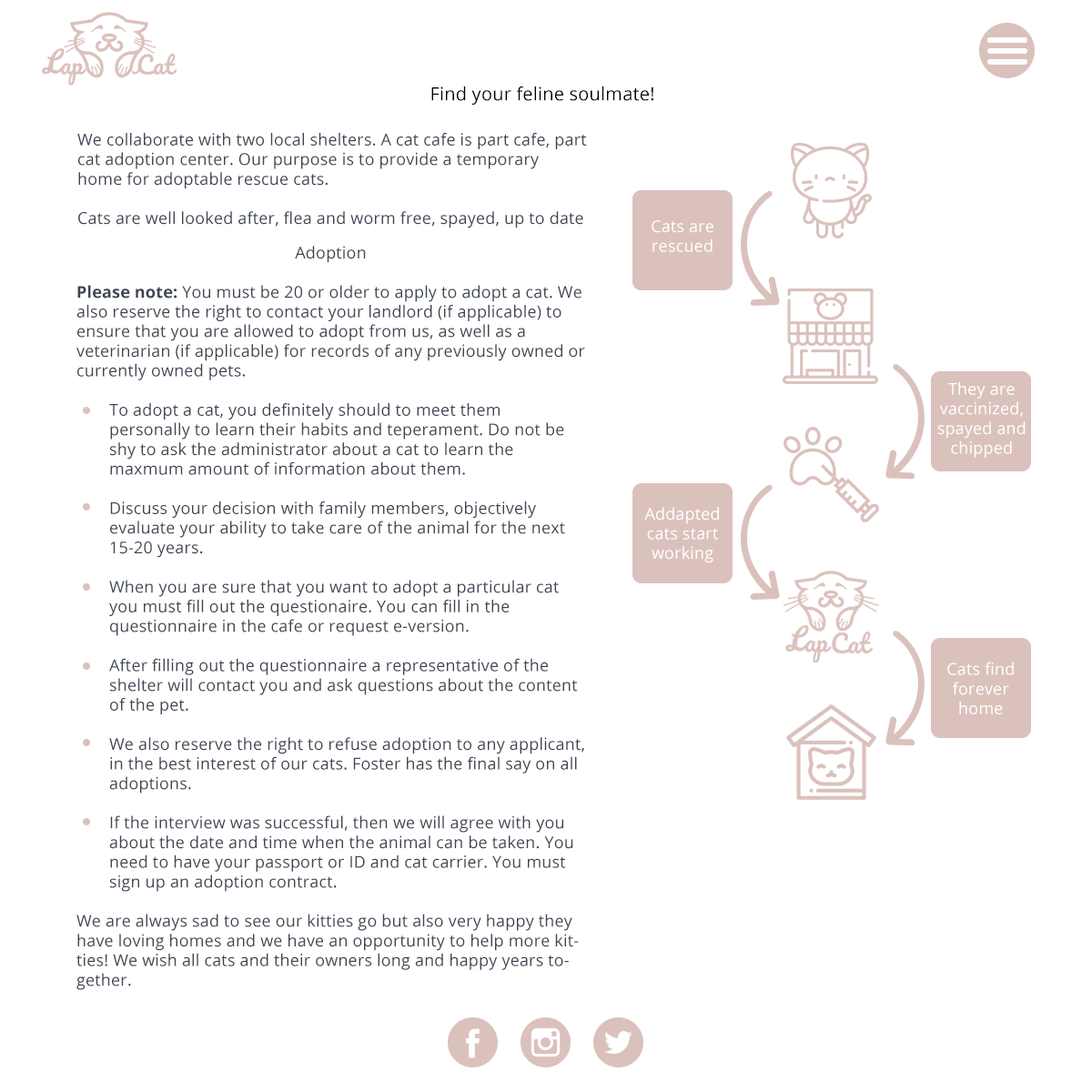
<style>
.page{position:relative;width:1092px;height:1092px;background:#ffffff}
.page>*{position:absolute;margin:0}
.t1{font:18.2px "OpenSans";letter-spacing:0.01em;color:#000000}
.t2{font:16.4px "OpenSans";letter-spacing:0.01em;color:#3c4552}
.t3{font:16.4px "OpenSans";letter-spacing:0.01em;color:#ffffff}
.t4{font:16.4px "OpenSans-Bold";letter-spacing:0.01em;color:#3c4552}
</style>
<div class="page">
<p class="t1" style="left:431px;top:86px;width:222px;height:19px">Find your feline soulmate!</p>
<p class="t2" style="left:77px;top:133px;width:510px;height:95px">We collaborate with two local shelters. A cat cafe is part cafe, part cat adoption center. Our purpose is to provide a temporary home for adoptable rescue cats.<br><br>Cats are well looked after, flea and worm free, spayed, up to date with injections and microchipped for safety. They are socialized by our cat staff from a feral kitten to a friendly cat.</p>
<p class="t3" style="left:652px;top:220px;width:61px;height:32px;text-align:center">Cats are <br>rescued</p>
<p class="t2" style="left:76px;top:246px;width:509px;height:744px;text-align:center">Adoption<br><br><span class="t4">Please note:</span> You must be 20 or older to apply to adopt a cat. We also reserve the right to contact your landlord (if applicable) to ensure that you are allowed to adopt from us, as well as a <br>veterinarian (if applicable) for records of any previously owned or currently owned pets.<br><br> To adopt a cat, you definitely should to meet them<br> personally to learn their habits and teperament. Do not be   shy to ask the administrator about a cat to learn the     maxmum amount of information about them. <br><br> Discuss your decision with family members, objectively <br> evaluate your ability to take care of the animal for the next   15-20 years.<br><br> When you are sure that you want to adopt a particular cat    you must fill out the questionaire. You can fill in the <br> questionnaire in the cafe or request e-version.<br><br> After filling out the questionnaire a representative of the    shelter will contact you and ask questions about the content   of the pet.<br><br> We also reserve the right to refuse adoption to any applicant,   in the best interest of our cats. Foster has the final say on all   adoptions.<br><br> If the interview was successful, then we will agree with you   about the date and time when the animal can be taken. You   need to have your passport or ID and cat carrier. You must   sign up an adoption contract. <br><br>We are always sad to see our kitties go but also very happy they have loving homes and we have an opportunity to help more kitties! We wish all cats and their owners long and happy years together.<br><br>ATTENTION: you can always return the animal to the cat-cafe if you have circumstances under which it’s no longer possible to keep it.</p>
<p class="t3" style="left:937px;top:382px;width:89px;height:76px;text-align:center">They are <br>vaccinized, spayed and chipped</p>
<p class="t3" style="left:644px;top:507px;width:75px;height:56px;text-align:center">Addapted cats start working <br>at a cat cafe</p>
<p class="t3" style="left:947px;top:662px;width:67px;height:52px;text-align:center">Cats find <br>forever home</p>
</div>
